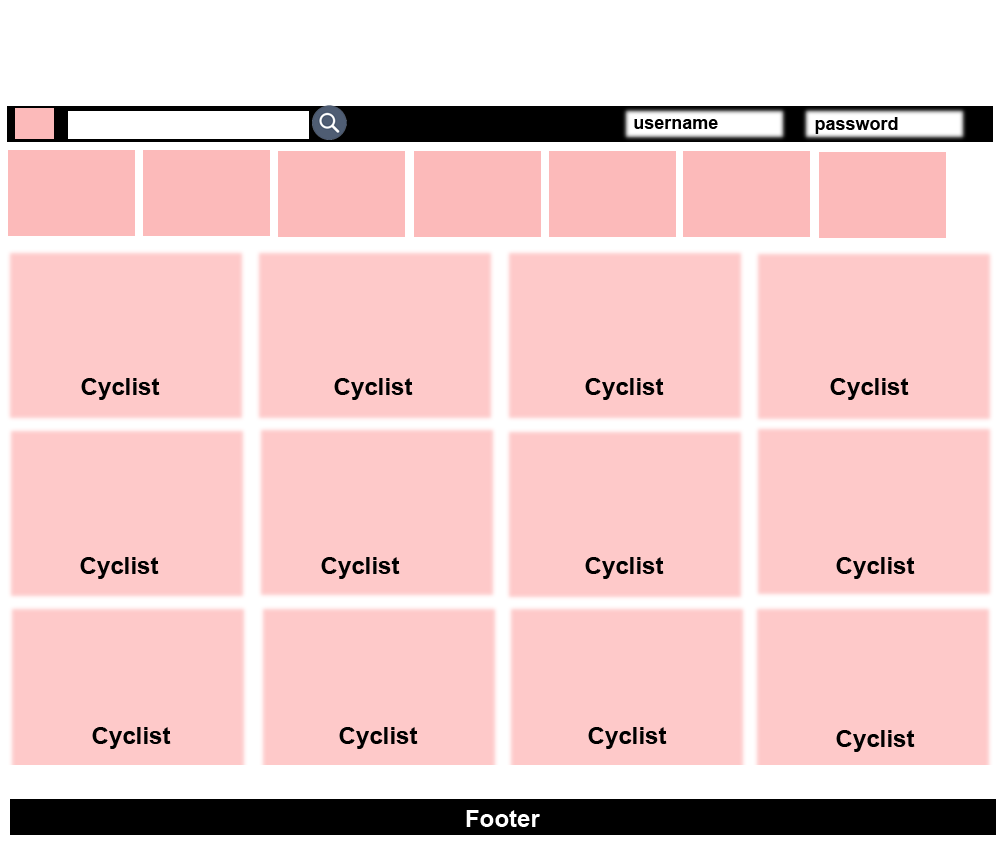
<style>
.page{position:relative;width:1000px;height:864px;background:#fec9c9}
.page>*{position:absolute;margin:0}
.t1{font:18px "Arial-BoldMT";color:#000000}
.t2{font:24px "Arial-BoldMT";color:#000000}
.t3{font:24px "Arial-BoldMT";color:#ffffff}
</style>
<div class="page">
<p class="t1" style="left:634px;top:119px;width:84px;height:10px">username</p>
<p class="t1" style="left:815px;top:117px;width:83px;height:17px">password</p>
<p class="t2" style="left:81px;top:378px;width:79px;height:22px">Cyclist</p>
<p class="t2" style="left:334px;top:378px;width:79px;height:22px">Cyclist</p>
<p class="t2" style="left:585px;top:378px;width:79px;height:22px">Cyclist</p>
<p class="t2" style="left:830px;top:378px;width:79px;height:22px">Cyclist</p>
<p class="t2" style="left:80px;top:557px;width:79px;height:22px">Cyclist</p>
<p class="t2" style="left:321px;top:557px;width:79px;height:22px">Cyclist</p>
<p class="t2" style="left:585px;top:557px;width:79px;height:22px">Cyclist</p>
<p class="t2" style="left:836px;top:557px;width:79px;height:22px">Cyclist</p>
<p class="t2" style="left:92px;top:727px;width:79px;height:22px">Cyclist</p>
<p class="t2" style="left:339px;top:727px;width:79px;height:22px">Cyclist</p>
<p class="t2" style="left:588px;top:727px;width:79px;height:22px">Cyclist</p>
<p class="t2" style="left:836px;top:730px;width:79px;height:22px">Cyclist</p>
<p class="t3" style="left:466px;top:810px;width:74px;height:17px">Footer</p>
</div>
